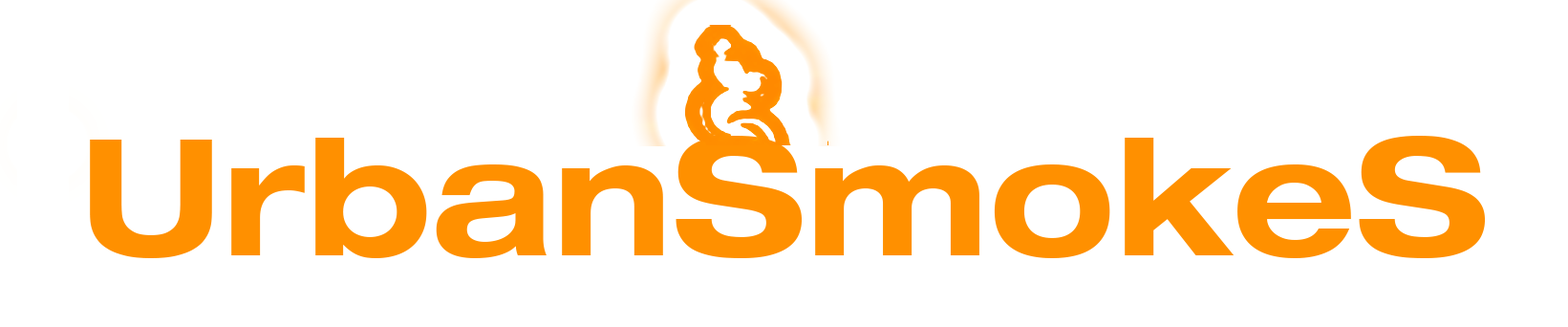
<style>
.page{position:relative;width:1568px;height:327px;background:#ffffff}
.page>*{position:absolute;margin:0}
.t1{font:162.4px "HelveticaNeueLTCom-BdEx";color:#ff9000}
</style>
<div class="page">
<p class="t1" style="left:90px;top:136px;width:1395px;height:122px">UrbanSmokeS</p>
</div>
